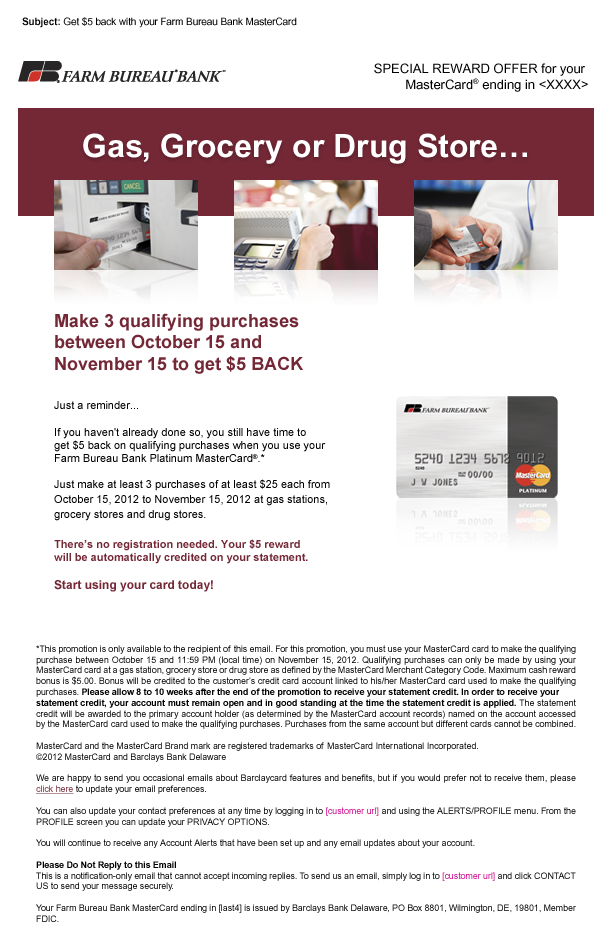
<style>
.page{position:relative;width:611px;height:936px;background:#ffffff}
.page>*{position:absolute;margin:0}
.t1{font:10px "ArialMT";letter-spacing:-0.01em;color:#000000}
.t2{font:10px "ArialMT-Bold";letter-spacing:-0.01em;color:#000000}
.t3{font:13px "ArialMT";color:#000000}
.t4{font:32px "ArialMT-Bold";color:#ffffff}
.t5{font:11px "ArialMT";color:#000000}
.t6{font:18px "Arial-BoldMT";color:#742836}
.t7{font:11px/26px "ArialMT";color:#000000}
.t8{font:11px/15px "ArialMT";color:#000000}
.t9{font:11px/30px "Arial-BoldMT";color:#742836}
.t10{font:11px "Arial-BoldMT";color:#742836}
.t11{font:12px "Arial-BoldMT";color:#742836}
.t12{font:9px "ArialMT";letter-spacing:-0.01em;color:#000000}
.t13{font:9px "Arial-BoldMT";letter-spacing:-0.01em;color:#000000}
.t14{font:9px "ArialMT";letter-spacing:-0.01em;color:#742836;text-decoration:underline}
.t15{font:9px "ArialMT";letter-spacing:-0.01em;color:#ca0088}
.t16{font:9px "ArialMT-Bold";letter-spacing:-0.01em;color:#000000}
</style>
<div class="page">
<p class="t1" style="left:22px;top:17px;width:275px;height:11px"><span class="t2">Subject:</span> Get $5 back with your Farm Bureau Bank MasterCard</p>
<p class="t3" style="left:374px;top:63px;width:214px;height:29px;text-align:right">SPECIAL REWARD OFFER for your <br>MasterCard® ending in &lt;XXXX&gt;</p>
<p class="t4" style="left:83px;top:133px;width:444px;height:31px">Gas, Grocery or Drug Store…</p>
<p class="t5" style="left:54px;top:313px;width:276px;height:279px"><span class="t6">Make 3 qualifying purchases <br>between October 15 and <br>November 15 to get $5 BACK<br></span><br><br>Just a reminder...<br><br>If you haven't already done so, you still have time to <br>get $5 back on qualifying purchases when you use your <br>Farm Bureau Bank Platinum MasterCard®.*<br><span class="t7">Just make at least 3 purchases of at least $25 each </span><span class="t8">from <br>October 15, 2012 to November 15, 2012 at gas stations,<br>grocery stores and drug stores.<br></span><span class="t9">There’s no registration needed. Your $5 reward <br></span><span class="t10">will be automatically credited on your statement.<br><br></span><span class="t11">Start using your card today!</span></p>
<p class="t12" style="left:36px;top:645px;width:540px;height:277px;text-align:justify">*This promotion is only available to the recipient of this email. For this promotion, you must use your MasterCard card to make the qualifying purchase between October 15 and 11:59 PM (local time) on November 15, 2012. Qualifying purchases can only be made by using your MasterCard card at a gas station, grocery store or drug store as defined by the MasterCard Merchant Category Code. Maximum cash reward bonus is $5.00. Bonus will be credited to the customer’s credit card account linked to his/her MasterCard card used to make the qualifying purchases. <span class="t13">Please allow 8 to 10 weeks after the end of the promotion to receive your statement credit. In order to receive your <br>statement credit, your account must remain open and in good standing at the time the statement credit is applied. </span>The statement credit will be awarded to the primary account holder (as determined by the MasterCard account records) named on the account accessed by the MasterCard card used to make the qualifying purchases. Purchases from the same account but different cards cannot be combined. <br> <br>MasterCard and the MasterCard Brand mark are registered trademarks of MasterCard International Incorporated.<br>©2012 MasterCard and Barclays Bank Delaware<br><br>We are happy to send you occasional emails about Barclaycard features and benefits, but if you would prefer not to receive them, please <span class="t14">click here</span> to update your email preferences.<br><br>You can also update your contact preferences at any time by logging in to <span class="t15">[customer url] </span>and using the ALERTS/PROFILE menu. From the PROFILE screen you can update your PRIVACY OPTIONS.<br><br>You will continue to receive any Account Alerts that have been set up and any email updates about your account.<br><br><span class="t16">Please Do Not Reply to this Email<br></span>This is a notification-only email that cannot accept incoming replies. To send us an email, simply log in to <span class="t15">[customer url] </span>and click CONTACT US to send your message securely.<br><br>Your Farm Bureau Bank MasterCard ending in [last4] is issued by Barclays Bank Delaware, PO Box 8801, Wilmington, DE, 19801, Member FDIC.</p>
</div>
